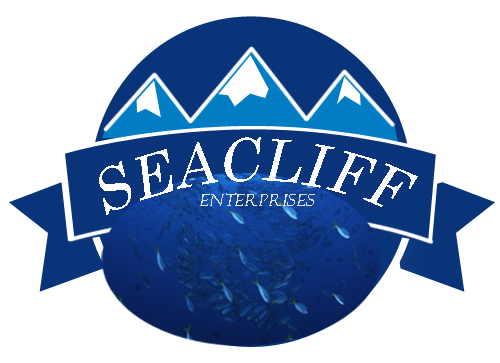
<style>
.page{position:relative;width:500px;height:363px;background:#ffffff}
.page>*{position:absolute;margin:0}
.t1{font:58.3px "CenturySchoolbook";letter-spacing:0.05em;color:#ffffff;font-style:italic}
.t2{font:17.3px "FelixTitlingMT";letter-spacing:0.025em;color:#dce1d5;font-style:italic}
</style>
<div class="page">
<p class="t1" style="left:99px;top:137px;width:319px;height:78px">SEACLIFF</p>
<p class="t2" style="left:200px;top:193px;width:115px;height:13px">Enterprises</p>
</div>
